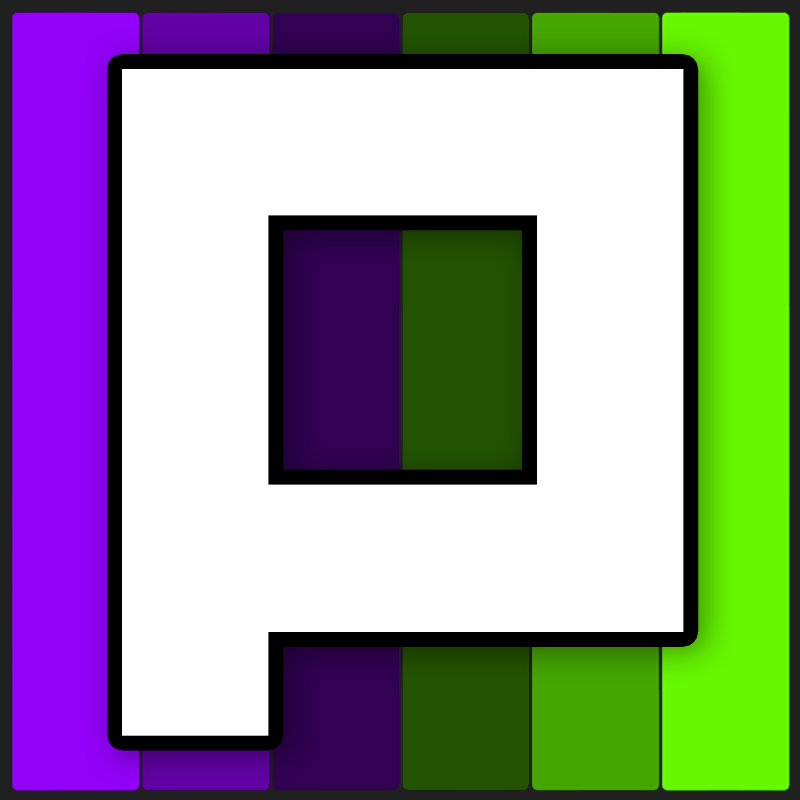
<style>
.page{position:relative;width:800px;height:800px;background:#ffffff}
.page>*{position:absolute;margin:0}
.t1{font:949.8px "ZipSonik";color:#ffffff}
</style>
<div class="page">
<p class="t1" style="left:122px;top:69px;width:562px;height:667px">P</p>
</div>
